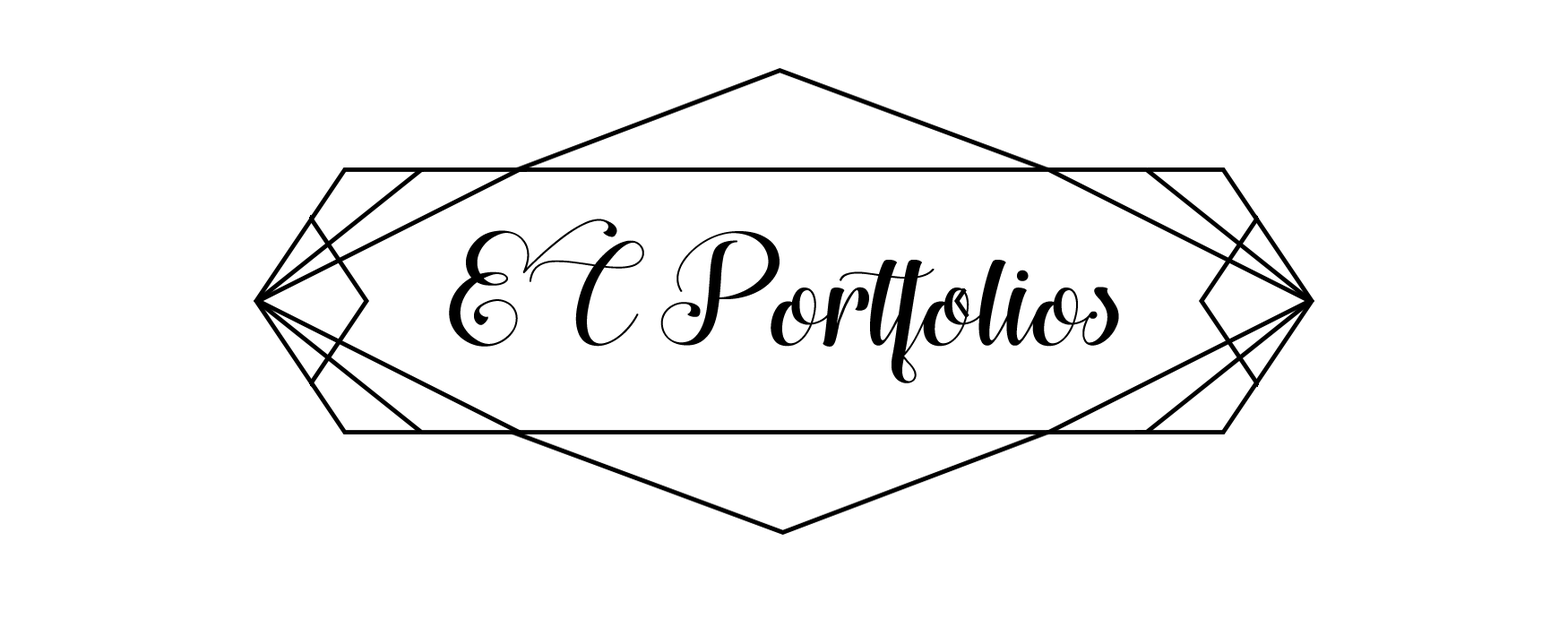
<style>
.page{position:relative;width:1568px;height:627px;background:#ffffff}
.page>*{position:absolute;margin:0}
.t1{font:150.6px "HugsandKissesxoxoDemo";color:#000000;scale:1.05 1}
</style>
<div class="page">
<p class="t1" style="left:449px;top:219px;width:670px;height:164px">EC Portfolios</p>
</div>
